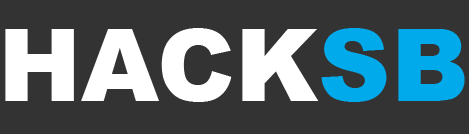
<style>
.page{position:relative;width:469px;height:134px;background:#333333}
.page>*{position:absolute;margin:0}
.t1{font:100px "Arial-Black";color:#ffffff}
.t2{font:100px "Arial-Black";color:#00aaeb}
</style>
<div class="page">
<p class="t1" style="left:5px;top:28px;width:460px;height:74px">HACK<span class="t2">SB</span></p>
</div>
